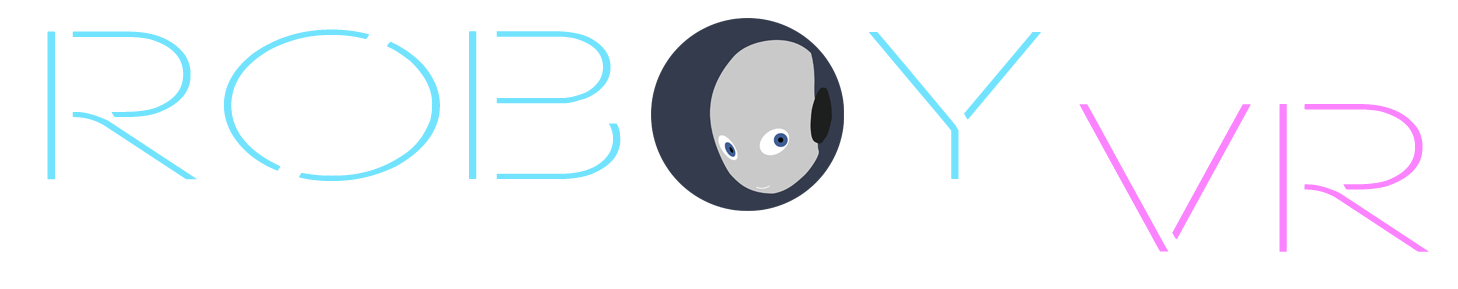
<style>
.page{position:relative;width:1458px;height:289px;background:#ffffff}
.page>*{position:absolute;margin:0}
.t1{font:210.9px "NEONLIGHTS";color:#71e3ff;scale:1.42 1}
.t2{font:210.9px "NEONLIGHTS";color:#fb83ff;scale:1.42 1}
</style>
<div class="page">
<p class="t1" style="left:47px;top:29px;width:994px;height:152px">ROB   Y</p>
<p class="t2" style="left:1079px;top:104px;width:350px;height:148px">VR</p>
</div>
